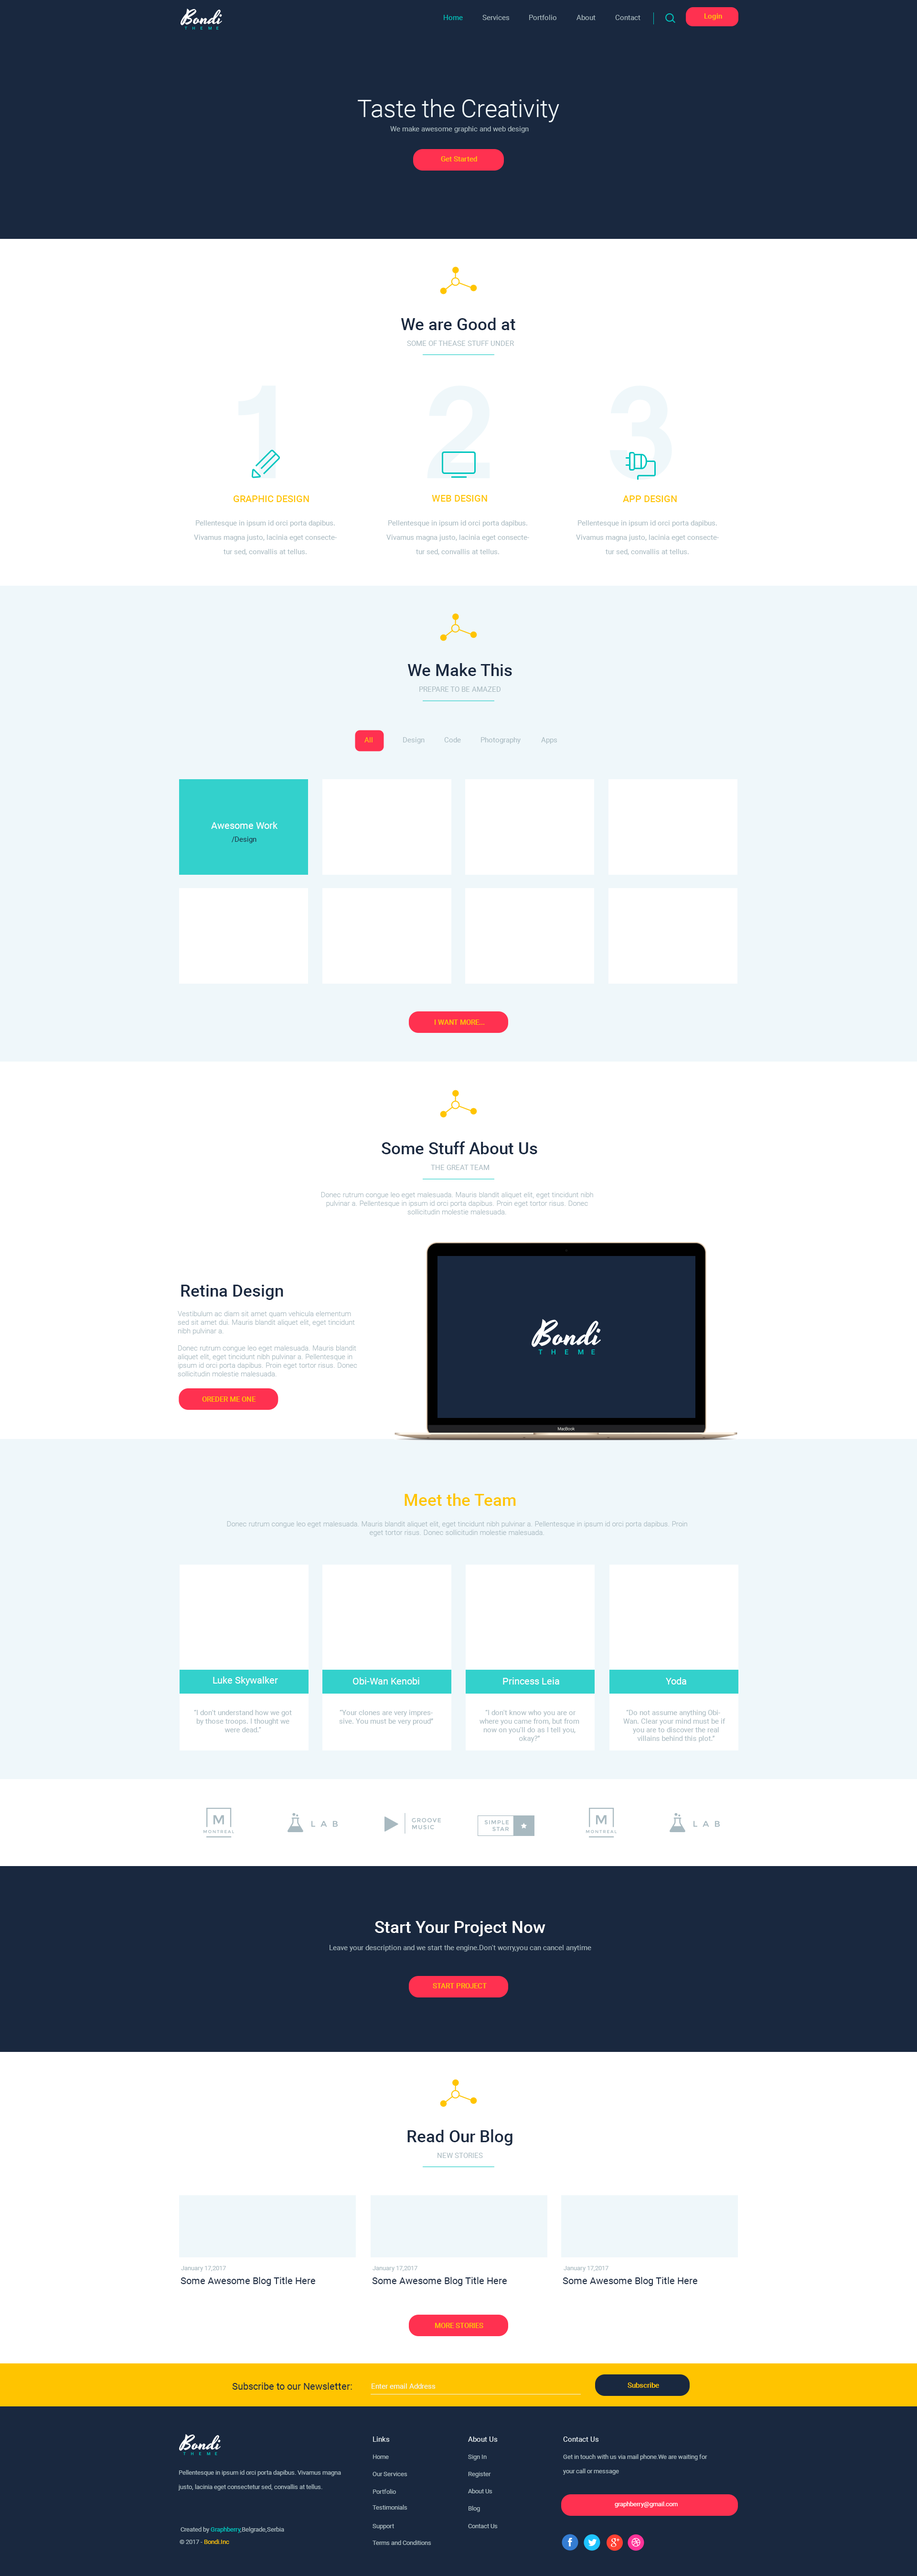
<style>
.page{position:relative;width:917px;height:2576px;background:#ffffff}
.page>*{position:absolute;margin:0}
.t1{font:7.2px "Roboto-Regular";color:#00c7c0}
.t2{font:7.2px "Roboto-Regular";color:#a8b9c0}
.t3{font:7.2px "Roboto-Medium";color:#ffc501}
.t4{font:24.4px "Roboto-Light";color:#f0f8fb}
.t5{font:16.7px "Roboto-Medium";color:#1a2940}
.t6{font:9.6px "Roboto-Medium";color:#ffc501}
.t7{font:7.2px/14.3px "Roboto-Regular";color:#a8b9c0}
.t8{font:7.2px "Roboto-Regular";color:#ffc501}
.t9{font:9.6px "Roboto-Regular";color:#ffffff}
.t10{font:7.2px "Roboto-Regular";color:#1a2940}
.t11{font:7.2px "Roboto-Light";color:#a8b9c0}
.t12{font:16.7px "Roboto-Medium";color:#ffc501}
.t13{font:16.7px "Roboto-Medium";color:#ffffff}
.t14{font:6.2px "Roboto-Regular";color:#a8b9c0}
.t15{font:9.6px "Roboto-Regular";color:#1a2940}
.t16{font:7.2px "Roboto-Regular";color:#f0f8fb}
.t17{font:6.2px/14.3px "Roboto-Regular";color:#a8b9c0}
.t18{font:6.2px "Roboto-Regular";color:#ffffff}
.t19{font:6.2px "Roboto-Regular";color:#00c7c0}
.t20{font:6.2px "Roboto-Regular";color:#ffc501}
</style>
<div class="page">
<p class="t1" style="left:444px;top:15px;width:19px;height:5px">Home</p>
<p class="t2" style="left:483px;top:15px;width:27px;height:5px">Services</p>
<p class="t2" style="left:529px;top:15px;width:28px;height:5px">Portfolio</p>
<p class="t2" style="left:577px;top:15px;width:19px;height:5px">About</p>
<p class="t2" style="left:615px;top:15px;width:26px;height:5px">Contact</p>
<p class="t3" style="left:705px;top:13px;width:17px;height:7px">Login</p>
<p class="t4" style="left:358px;top:99px;width:201px;height:23px">Taste the Creativity</p>
<p class="t2" style="left:390px;top:126px;width:139px;height:7px">We make awesome graphic and web design</p>
<p class="t3" style="left:441px;top:156px;width:36px;height:5px">Get Started</p>
<p class="t5" style="left:401px;top:318px;width:114px;height:12px">We are Good at</p>
<p class="t2" style="left:407px;top:341px;width:107px;height:5px">SOME OF THEASE STUFF UNDER</p>
<p class="t6" style="left:234px;top:495px;width:75px;height:7px">GRAPHIC DESIGN</p>
<p class="t6" style="left:432px;top:495px;width:55px;height:7px">WEB DESIGN</p>
<p class="t6" style="left:623px;top:495px;width:54px;height:7px">APP DESIGN</p>
<p class="t7" style="left:194px;top:520px;width:143px;height:35px;text-align:center">Pellentesque in ipsum id orci porta dapibus. Vivamus magna justo, lacinia eget consectetur sed, convallis at tellus.</p>
<p class="t7" style="left:386px;top:520px;width:143px;height:35px;text-align:center">Pellentesque in ipsum id orci porta dapibus. Vivamus magna justo, lacinia eget consectetur sed, convallis at tellus.</p>
<p class="t7" style="left:576px;top:520px;width:143px;height:35px;text-align:center">Pellentesque in ipsum id orci porta dapibus. Vivamus magna justo, lacinia eget consectetur sed, convallis at tellus.</p>
<p class="t5" style="left:408px;top:663px;width:104px;height:13px">We Make This</p>
<p class="t2" style="left:419px;top:687px;width:82px;height:5px">PREPARE TO BE AMAZED</p>
<p class="t8" style="left:365px;top:737px;width:8px;height:5px">All</p>
<p class="t2" style="left:403px;top:737px;width:22px;height:7px">Design</p>
<p class="t2" style="left:444px;top:737px;width:17px;height:5px">Code</p>
<p class="t2" style="left:481px;top:737px;width:40px;height:7px">Photography</p>
<p class="t2" style="left:541px;top:737px;width:17px;height:7px">Apps</p>
<p class="t9" style="left:211px;top:822px;width:67px;height:7px">Awesome Work</p>
<p class="t10" style="left:232px;top:837px;width:25px;height:6px">/Design</p>
<p class="t3" style="left:435px;top:1020px;width:50px;height:5px">I WANT MORE...</p>
<p class="t5" style="left:382px;top:1141px;width:155px;height:13px">Some Stuff About Us</p>
<p class="t2" style="left:431px;top:1165px;width:58px;height:5px">THE GREAT TEAM</p>
<p class="t11" style="left:321px;top:1192px;width:272px;height:22px;text-align:center">Donec rutrum congue leo eget malesuada. Mauris blandit aliquet elit, eget tincidunt nibh pulvinar a. Pellentesque in ipsum id orci porta dapibus. Proin eget tortor risus. Donec sollicitudin molestie malesuada.</p>
<p class="t5" style="left:181px;top:1285px;width:102px;height:15px">Retina Design</p>
<p class="t11" style="left:178px;top:1311px;width:179px;height:65px">Vestibulum ac diam sit amet quam vehicula elementum sed sit amet dui. Mauris blandit aliquet elit, eget tincidunt nibh pulvinar a. <br><br>Donec rutrum congue leo eget malesuada. Mauris blandit aliquet elit, eget tincidunt nibh pulvinar a. Pellentesque in ipsum id orci porta dapibus. Proin eget tortor risus. Donec sollicitudin molestie malesuada.</p>
<p class="t3" style="left:202px;top:1396px;width:54px;height:6px">OREDER ME ONE</p>
<p class="t12" style="left:405px;top:1493px;width:111px;height:13px">Meet the Team</p>
<p class="t11" style="left:227px;top:1521px;width:460px;height:15px;text-align:center">Donec rutrum congue leo eget malesuada. Mauris blandit aliquet elit, eget tincidunt nibh pulvinar a. Pellentesque in ipsum id orci porta dapibus. Proin eget tortor risus. Donec sollicitudin molestie malesuada.</p>
<p class="t9" style="left:213px;top:1676px;width:65px;height:9px">Luke Skywalker</p>
<p class="t9" style="left:353px;top:1677px;width:66px;height:8px">Obi-Wan Kenobi</p>
<p class="t9" style="left:503px;top:1677px;width:56px;height:8px">Princess Leia</p>
<p class="t9" style="left:666px;top:1677px;width:21px;height:8px">Yoda</p>
<p class="t2" style="left:194px;top:1710px;width:98px;height:22px;text-align:center">“I don't understand how we got by those troops. I thought we were dead.“</p>
<p class="t2" style="left:339px;top:1710px;width:94px;height:15px;text-align:center">“Your clones are very impressive. You must be very proud”</p>
<p class="t2" style="left:480px;top:1710px;width:100px;height:32px;text-align:center">“I don't know who you are or where you came from, but from now on you'll do as I tell you, okay?”</p>
<p class="t2" style="left:623px;top:1710px;width:103px;height:32px;text-align:center">“Do not assume anything Obi-Wan. Clear your mind must be if you are to discover the real villains behind this plot.”</p>
<p class="t13" style="left:375px;top:1921px;width:171px;height:15px">Start Your Project Now</p>
<p class="t2" style="left:330px;top:1945px;width:261px;height:7px">Leave your description and we start the engine.Don't worry,you can cancel anytime</p>
<p class="t3" style="left:433px;top:1983px;width:54px;height:5px">START PROJECT</p>
<p class="t5" style="left:408px;top:2129px;width:105px;height:17px">Read Our Blog</p>
<p class="t2" style="left:438px;top:2153px;width:45px;height:5px">NEW STORIES</p>
<p class="t14" style="left:181px;top:2266px;width:45px;height:6px">January 17,2017</p>
<p class="t14" style="left:373px;top:2266px;width:45px;height:6px">January 17,2017</p>
<p class="t14" style="left:564px;top:2266px;width:45px;height:6px">January 17,2017</p>
<p class="t15" style="left:181px;top:2277px;width:134px;height:9px">Some Awesome Blog Title Here</p>
<p class="t15" style="left:372px;top:2277px;width:135px;height:9px">Some Awesome Blog Title Here</p>
<p class="t15" style="left:563px;top:2277px;width:135px;height:9px">Some Awesome Blog Title Here</p>
<p class="t3" style="left:435px;top:2323px;width:48px;height:5px">MORE STORIES</p>
<p class="t15" style="left:232px;top:2383px;width:120px;height:7px">Subscribe to our Newsletter:</p>
<p class="t16" style="left:372px;top:2383px;width:64px;height:6px">Enter email Address</p>
<p class="t3" style="left:628px;top:2383px;width:31px;height:5px">Subscribe</p>
<p class="t16" style="left:373px;top:2436px;width:17px;height:6px">Links</p>
<p class="t16" style="left:468px;top:2436px;width:30px;height:6px">About Us</p>
<p class="t16" style="left:563px;top:2436px;width:36px;height:6px">Contact Us</p>
<p class="t14" style="left:373px;top:2455px;width:16px;height:4px">Home</p>
<p class="t14" style="left:468px;top:2455px;width:19px;height:5px">Sign In</p>
<p class="t17" style="left:563px;top:2454px;width:145px;height:21px">Get in touch with us via mail phone.We are waiting for <br>your call or message</p>
<p class="t17" style="left:178px;top:2470px;width:163px;height:20px">Pellentesque in ipsum id orci porta dapibus. Vivamus magna justo, lacinia eget consectetur sed, convallis at tellus.</p>
<p class="t14" style="left:373px;top:2472px;width:35px;height:4px">Our Services</p>
<p class="t14" style="left:468px;top:2472px;width:23px;height:6px">Register</p>
<p class="t14" style="left:373px;top:2489px;width:23px;height:5px">Portfolio</p>
<p class="t14" style="left:468px;top:2489px;width:25px;height:4px">About Us</p>
<p class="t18" style="left:615px;top:2501px;width:63px;height:7px">graphberry@gmail.com</p>
<p class="t14" style="left:373px;top:2505px;width:35px;height:5px">Testimonials</p>
<p class="t14" style="left:469px;top:2506px;width:11px;height:6px">Blog</p>
<p class="t14" style="left:373px;top:2524px;width:21px;height:6px">Support</p>
<p class="t14" style="left:468px;top:2524px;width:30px;height:4px">Contact Us</p>
<p class="t14" style="left:181px;top:2527px;width:103px;height:6px">Created by <span class="t19">Graphberry</span>,Belgrade,Serbia</p>
<p class="t20" style="left:180px;top:2539px;width:49px;height:5px"><span class="t14"> © 2017 - </span>Bondi.Inc</p>
<p class="t14" style="left:373px;top:2540px;width:58px;height:5px">Terms and Conditions</p>
</div>
